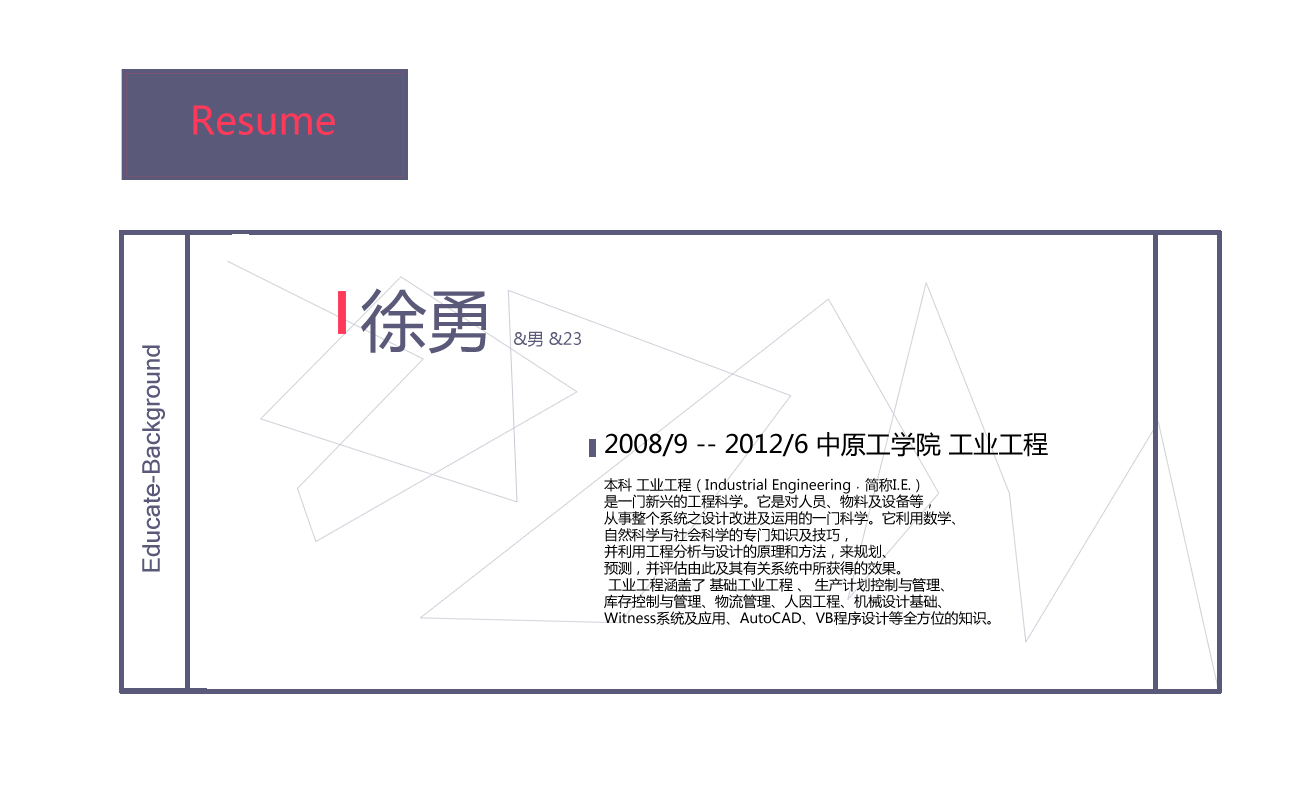
<style>
.page{position:relative;width:1300px;height:800px;background:#ffffff}
.page>*{position:absolute;margin:0}
.t1{font:38.5px "MicrosoftYaHei";color:#fe3a5a}
.t2{font:66.7px "MicrosoftYaHei";color:#5a5979}
.t3{font:16.4px "MicrosoftYaHei";color:#5a5979}
.t4{font:23.7px "Mangal";color:#5a5979}
.t5{font:13.9px "MicrosoftYaHei";color:#000000}
.t6{font:25px "MicrosoftYaHei";color:#000000}
</style>
<div class="page">
<p class="t1" style="left:193px;top:105px;width:142px;height:30px">Resume</p>
<p class="t2" style="left:361px;top:288px;width:125px;height:66px">徐勇</p>
<p class="t3" style="left:514px;top:331px;width:67px;height:16px">&amp;男 &amp;23</p>
<p class="t4" style="left:142px;top:345px;width:23px;height:227px;rotate:-90deg">Educate-Background</p>
<p class="t5" style="left:604px;top:432px;width:444px;height:193px"><span class="t6">2008/9 -- 2012/6 中原工学院 工业工程<br><br></span>本科 工业工程（Industrial Engineering﹐简称I.E.）<br>是一门新兴的工程科学。它是对人员、物料及设备等，<br>从事整个系统之设计改进及运用的一门科学。它利用数学、<br>自然科学与社会科学的专门知识及技巧，<br>并利用工程分析与设计的原理和方法，来规划、<br>预测，并评估由此及其有关系统中所获得的效果。<br> 工业工程涵盖了 基础工业工程 、 生产计划控制与管理、<br>库存控制与管理、物流管理、人因工程、机械设计基础、<br>Witness系统及应用、AutoCAD、VB程序设计等全方位的知识。</p>
</div>
